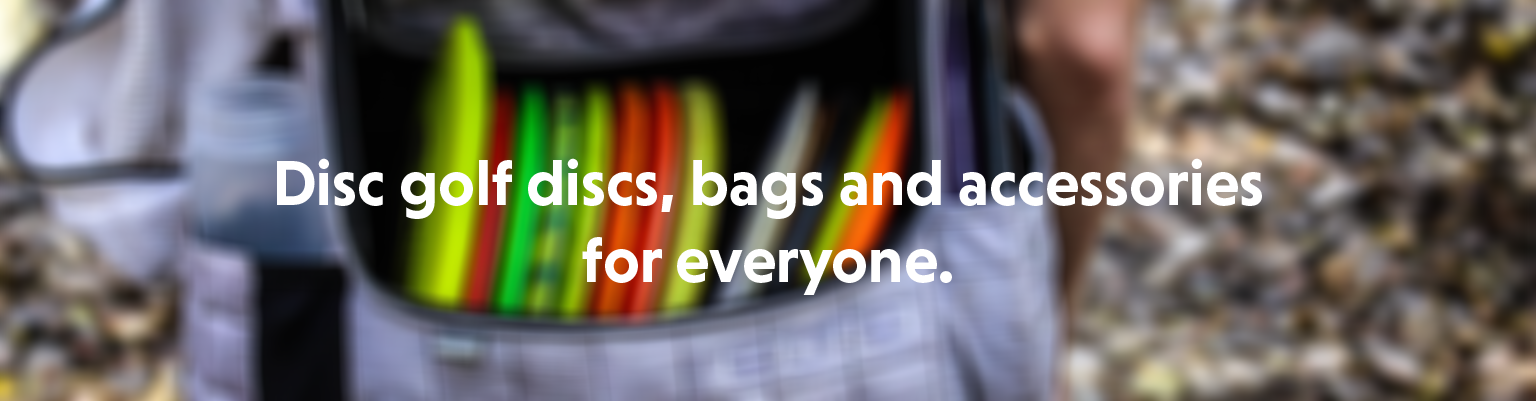
<style>
.page{position:relative;width:1536px;height:401px}
.page>*{position:absolute;margin:0}
.t1{font:64px "NiveauGroteskBold";color:#ffffff}
</style>
<div class="page">
<p class="t1" style="left:277px;top:158px;width:985px;height:137px;text-align:center">Disc golf discs, bags and accessories<br>for everyone.</p>
</div>
